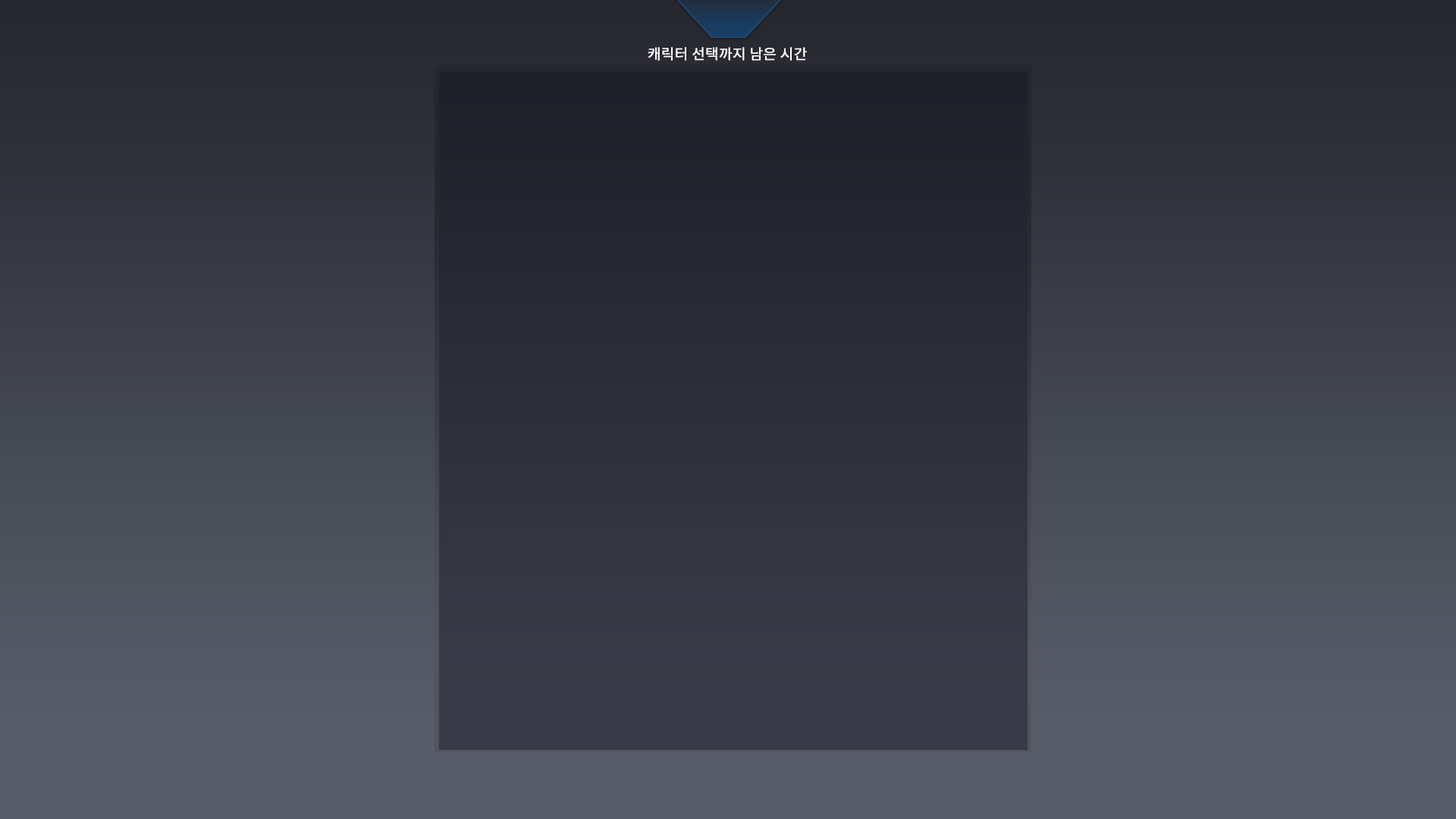
<style>
.page{position:relative;width:1456px;height:819px}
.page>*{position:absolute;margin:0}
.t1{font:14.5px "NotoSansCJKkr-Regular";letter-spacing:-0.01em;color:#ffffff;font-weight:bold}
</style>
<div class="page">
<p class="t1" style="left:648px;top:47px;width:159px;height:14px">캐릭터 선택까지 남은 시간</p>
</div>
